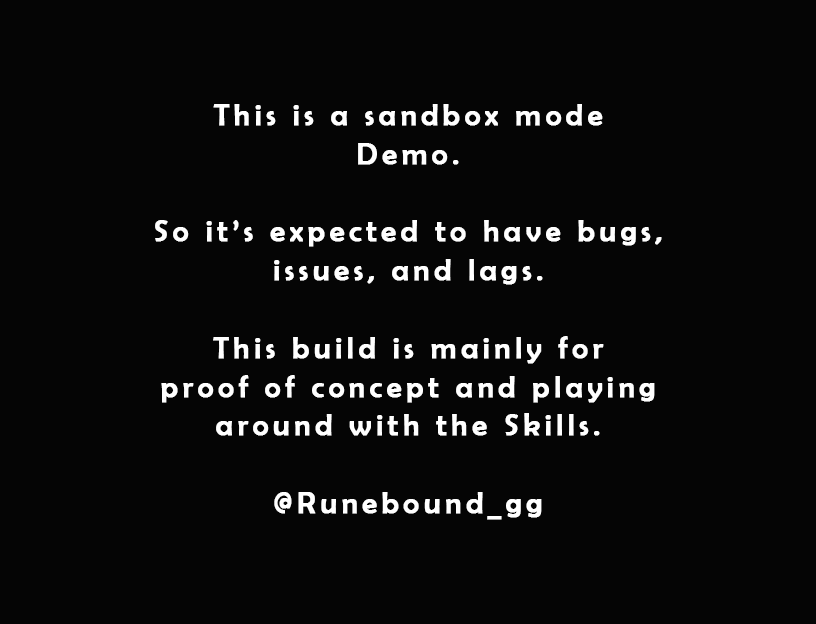
<style>
.page{position:relative;width:816px;height:624px;background:#050505}
.page>*{position:absolute;margin:0}
.t1{font:30px/38.8px "BerlinSansFB-Reg";letter-spacing:0.14em;color:#ffffff;font-weight:bold}
</style>
<div class="page">
<p class="t1" style="left:155px;top:104px;width:507px;height:416px;text-align:center">This is a sandbox mode<br>Demo.<br><br>So it’s expected to have bugs, issues, and lags.<br><br>This build is mainly for<br>proof of concept and playing<br>around with the Skills.<br><br>@Runebound_gg</p>
</div>
